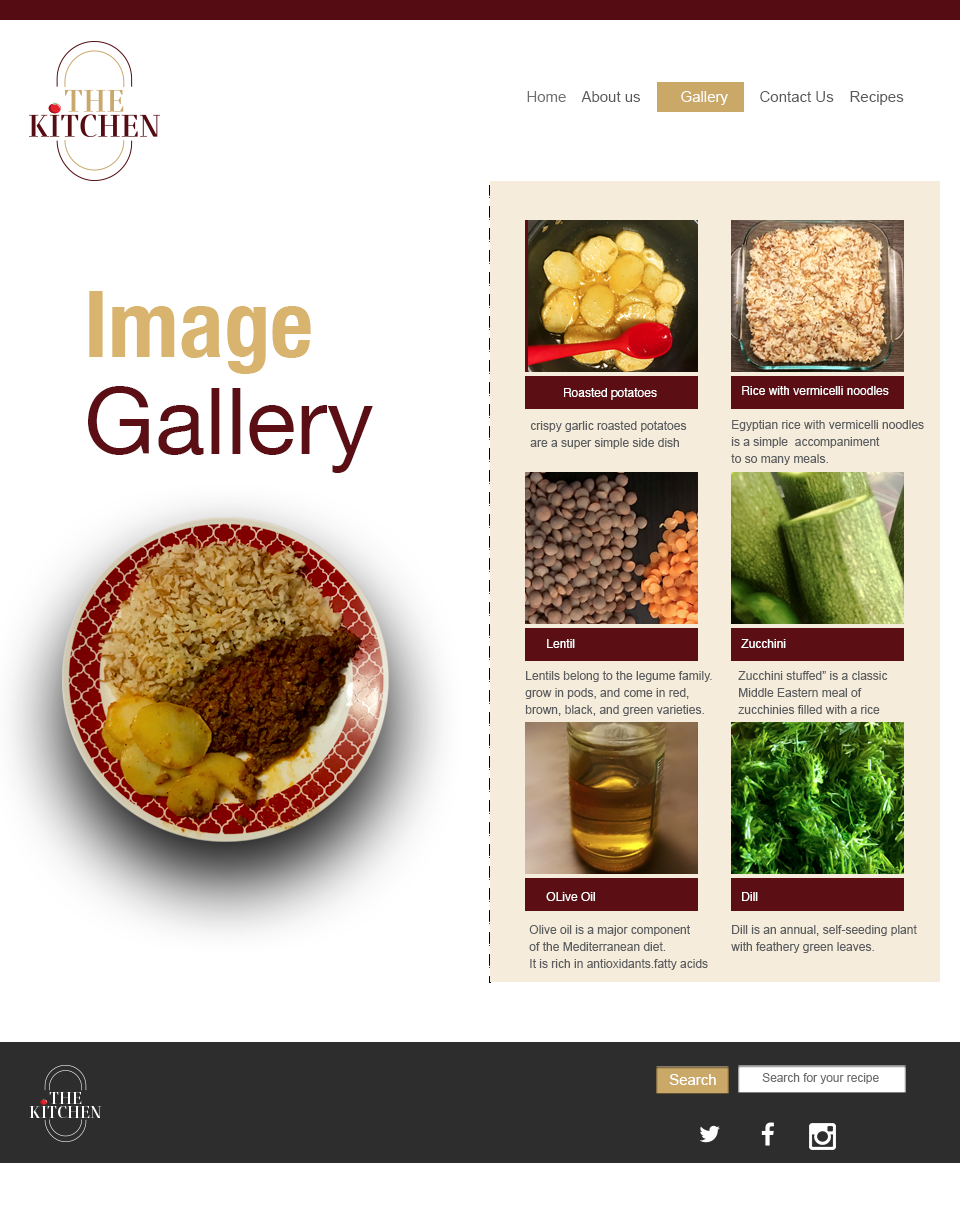
<style>
.page{position:relative;width:960px;height:1232px;background:#ffffff}
.page>*{position:absolute;margin:0}
.t1{font:15px "ArialMT";color:#6f6f72}
.t2{font:15px "ArialMT";color:#58595b}
.t3{font:15px "ArialMT";color:#ffffff}
.t4{font:93px/96.5px "HelveticaNeue";color:#5b0e14}
.t5{font:93px/88.1px "HelveticaNeue-CondensedBold";color:#d9b46e}
.t6{font:12px "Helvetica";color:#ffffff}
.t7{font:12px/17px "ArialMT";color:#5b5d60}
.t8{font:12px "ArialMT";color:#ffffff}
.t9{font:11.9px "ArialMT";color:#6e6e6e}
.t10{font:14.9px "ArialMT";color:#ffffff}
</style>
<div class="page">
<p class="t1" style="left:527px;top:91px;width:39px;height:11px">Home</p>
<p class="t2" style="left:581px;top:91px;width:60px;height:11px">About us</p>
<p class="t3" style="left:681px;top:91px;width:47px;height:14px">Gallery</p>
<p class="t2" style="left:760px;top:91px;width:74px;height:11px">Contact Us</p>
<p class="t2" style="left:850px;top:91px;width:54px;height:14px">Recipes</p>
<p class="t4" style="left:88px;top:291px;width:285px;height:182px"><span class="t5">Image<br></span>Gallery</p>
<p class="t6" style="left:564px;top:388px;width:93px;height:12px">Roasted potatoes</p>
<p class="t6" style="left:742px;top:386px;width:147px;height:9px">Rice with vermicelli noodles</p>
<p class="t7" style="left:530px;top:421px;width:157px;height:28px">crispy garlic roasted potatoes <br>are a super simple side dish</p>
<p class="t7" style="left:731px;top:420px;width:193px;height:45px">Egyptian rice with vermicelli noodles <br>is a simple  accompaniment <br>to so many meals.</p>
<p class="t6" style="left:547px;top:639px;width:28px;height:9px">Lentil</p>
<p class="t8" style="left:741px;top:639px;width:45px;height:9px">Zucchini</p>
<p class="t7" style="left:525px;top:671px;width:187px;height:45px">Lentils belong to the legume family. <br>grow in pods, and come in red, <br>brown, black, and green varieties.</p>
<p class="t7" style="left:738px;top:671px;width:150px;height:43px">Zucchini stuffed” is a classic <br>Middle Eastern meal of <br>zucchinies filled with a rice</p>
<p class="t6" style="left:546px;top:892px;width:49px;height:9px">OLive Oil</p>
<p class="t8" style="left:742px;top:892px;width:16px;height:9px">Dill</p>
<p class="t7" style="left:529px;top:925px;width:179px;height:45px">Olive oil is a major component <br>of the Mediterranean diet. <br>It is rich in antioxidants.fatty acids</p>
<p class="t7" style="left:731px;top:925px;width:186px;height:28px">Dill is an annual, self-seeding plant<br>with feathery green leaves.</p>
<p class="t9" style="left:762px;top:1073px;width:117px;height:11px">Search for your recipe</p>
<p class="t10" style="left:669px;top:1074px;width:47px;height:11px">Search</p>
</div>
